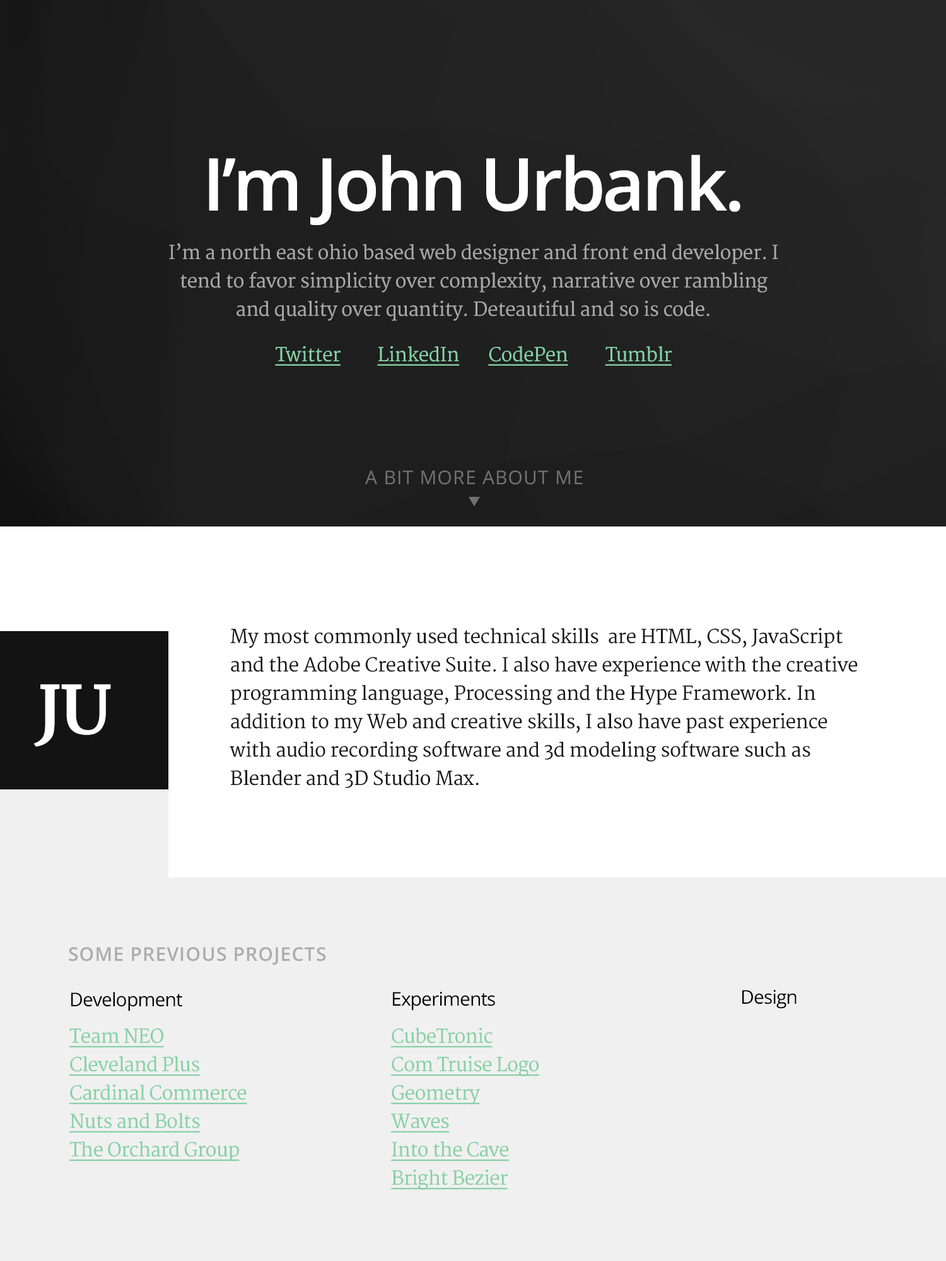
<style>
.page{position:relative;width:946px;height:1261px;background:#f0f0f0}
.page>*{position:absolute;margin:0}
.t1{font:73.1px "OpenSans-Semibold";letter-spacing:-0.04em;color:#ffffff}
.t2{font:18.9px/28.4px "Merriweather";letter-spacing:-0.02em;color:#a9a9a9}
.t3{font:18.9px/31.5px "Merriweather";letter-spacing:-0.02em;color:#a9a9a9}
.t4{font:18.9px "Merriweather";letter-spacing:-0.02em;color:#86d1a4;text-decoration:underline}
.t5{font:18.9px "OpenSans";letter-spacing:0.04em;color:#717171;text-transform:uppercase}
.t6{font:18.9px/28.4px "Merriweather";letter-spacing:-0.02em;color:#171717}
.t7{font:65.2px "Merriweather-Bold";letter-spacing:-0.02em;color:#ffffff;text-transform:uppercase}
.t8{font:18.9px "OpenSans-Semibold";letter-spacing:0.04em;color:#acacac;text-transform:uppercase}
.t9{font:18.9px "OpenSans";letter-spacing:-0.03em;color:#000000}
.t10{font:18.9px/28.4px "Merriweather";letter-spacing:-0.03em;color:#86d1a4;text-decoration:underline}
</style>
<div class="page">
<p class="t1" style="left:209px;top:154px;width:531px;height:71px">I’m John Urbank.</p>
<p class="t2" style="left:169px;top:243px;width:609px;height:78px;text-align:center"><span class="t3">I’m a north east ohio based web designer and front end developer. </span>I tend to favor simplicity over complexity, narrative over rambling and quality over quantity. Deteautiful and so is code.</p>
<p class="t4" style="left:275px;top:346px;width:65px;height:20px">Twitter</p>
<p class="t4" style="left:377px;top:346px;width:83px;height:20px">LinkedIn</p>
<p class="t4" style="left:488px;top:346px;width:80px;height:20px">CodePen</p>
<p class="t4" style="left:605px;top:346px;width:66px;height:20px">Tumblr</p>
<p class="t5" style="left:365px;top:470px;width:218px;height:15px">A Bit More about me</p>
<p class="t6" style="left:229px;top:628px;width:628px;height:160px">My most commonly used technical skills  are HTML, CSS, JavaScript and the Adobe Creative Suite. I also have experience with the creative programming language, Processing and the Hype Framework. In addition to my Web and creative skills, I also have past experience with audio recording software and 3d modeling software such as Blender and 3D Studio Max.</p>
<p class="t7" style="left:33px;top:684px;width:78px;height:62px">JU</p>
<p class="t8" style="left:69px;top:947px;width:257px;height:18px">Some Previous Projects</p>
<p class="t9" style="left:742px;top:990px;width:54px;height:19px">Design</p>
<p class="t9" style="left:71px;top:992px;width:111px;height:19px">Development</p>
<p class="t9" style="left:393px;top:992px;width:102px;height:19px">Experiments</p>
<p class="t10" style="left:69px;top:1028px;width:178px;height:133px">Team NEO<br>Cleveland Plus<br>Cardinal Commerce<br>Nuts and Bolts<br>The Orchard Group</p>
<p class="t10" style="left:391px;top:1028px;width:148px;height:162px">CubeTronic<br>Com Truise Logo<br>Geometry<br>Waves<br>Into the Cave<br>Bright Bezier</p>
</div>
